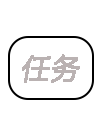
<style>
.page{position:relative;width:100px;height:140px;background:#ffffff}
.page>*{position:absolute;margin:0}
.t1{font:28px "MicrosoftYaHei";color:#bab2b2;font-weight:bold;font-style:italic}
</style>
<div class="page">
<p class="t1" style="left:22px;top:54px;width:58px;height:29px">任务</p>
</div>
